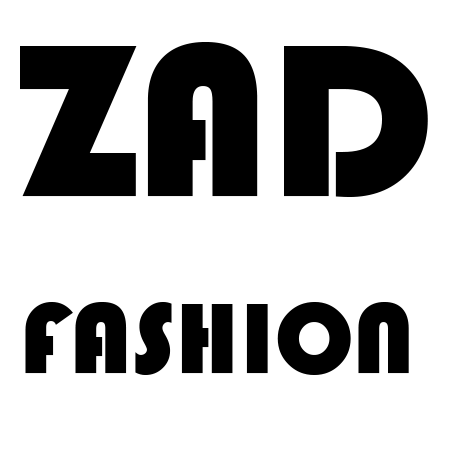
<style>
.page{position:relative;width:454px;height:454px;background:#ffffff}
.page>*{position:absolute;margin:0}
.t1{font:224.8px "Bauhaus93";color:#000000}
.t2{font:104.4px "Bauhaus93";color:#000000}
</style>
<div class="page">
<p class="t1" style="left:20px;top:42px;width:408px;height:155px">ZAD</p>
<p class="t2" style="left:25px;top:302px;width:384px;height:73px">FASHION</p>
</div>
